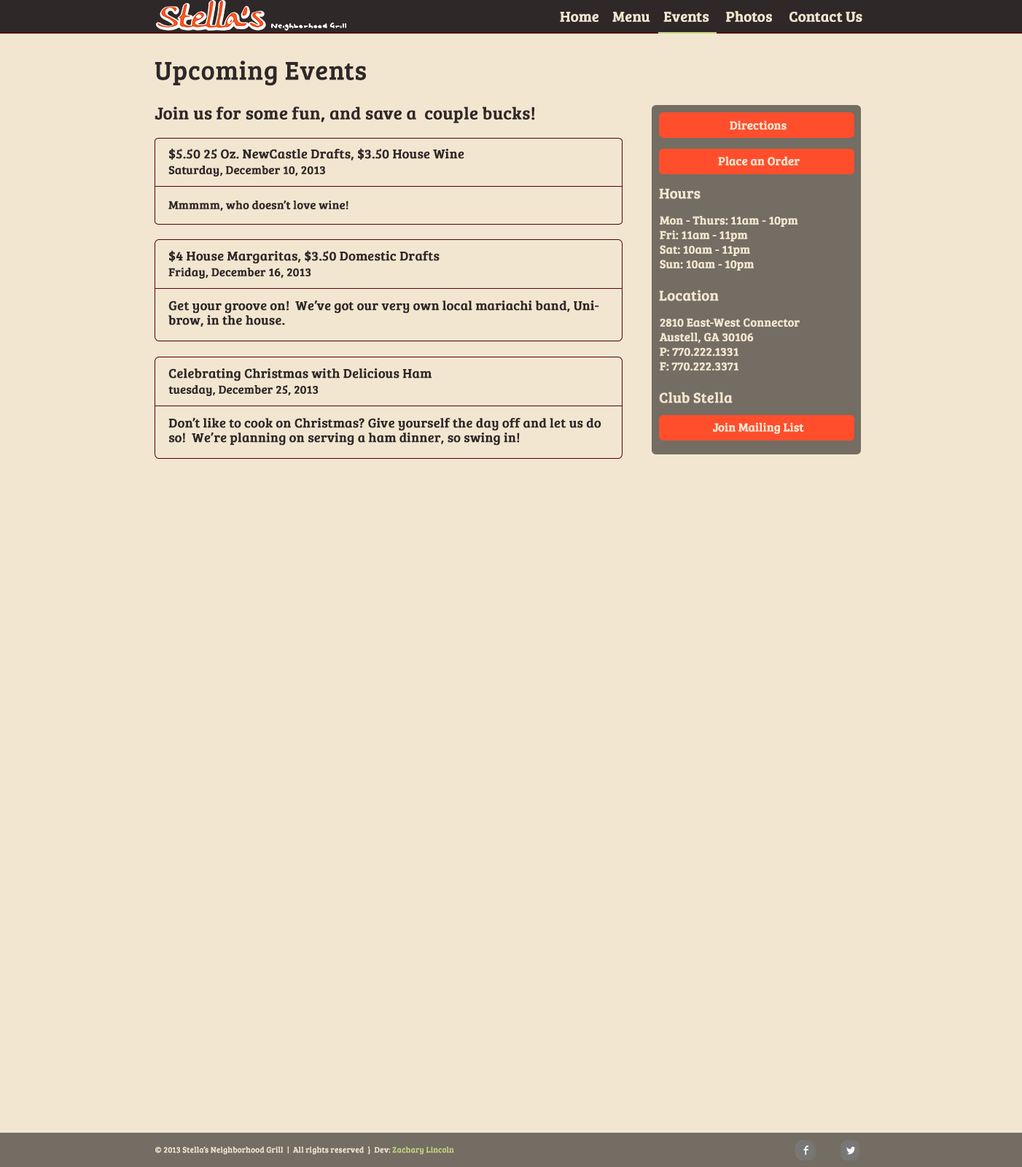
<style>
.page{position:relative;width:1022px;height:1167px;background:#f3e6d0}
.page>*{position:absolute;margin:0}
.t1{font:14.6px "BreeSerif-Regular";color:#f3e6d0;font-weight:bold}
.t2{font:26.2px "BreeSerif-Regular";color:#2e2828;font-weight:bold}
.t3{font:17.5px "BreeSerif-Regular";color:#2e2828;font-weight:bold}
.t4{font:11.7px "BreeSerif-Regular";color:#f3e6d0;font-weight:bold}
.t5{font:13.1px "BreeSerif-Regular";color:#2e2828;font-weight:bold}
.t6{font:11.7px "BreeSerif-Regular";color:#2e2828;font-weight:bold}
.t7{font:11.7px/14.6px "BreeSerif-Regular";color:#f3e6d0;font-weight:bold}
.t8{font:13.1px/14.6px "BreeSerif-Regular";color:#2e2828;font-weight:bold}
.t9{font:8px "BreeSerif-Regular";color:#f3e6d0;font-weight:bold}
.t10{font:8px "BreeSerif-Regular";color:#c5d580;font-weight:bold}
</style>
<div class="page">
<p class="t1" style="left:560px;top:11px;width:303px;height:11px">Home    Menu    Events     Photos     Contact Us</p>
<p class="t2" style="left:155px;top:61px;width:211px;height:25px">Upcoming Events</p>
<p class="t3" style="left:155px;top:106px;width:380px;height:17px">Join us for some fun, and save a  couple bucks!</p>
<p class="t4" style="left:730px;top:120px;width:57px;height:10px">Directions</p>
<p class="t5" style="left:169px;top:148px;width:295px;height:12px">$5.50 25 Oz. NewCastle Drafts, $3.50 House Wine</p>
<p class="t4" style="left:718px;top:156px;width:82px;height:10px">Place an Order</p>
<p class="t6" style="left:168px;top:166px;width:157px;height:10px">Saturday, December 10, 2013</p>
<p class="t1" style="left:659px;top:188px;width:42px;height:11px">Hours</p>
<p class="t6" style="left:168px;top:200px;width:181px;height:11px">Mmmmm, who doesn’t love wine!</p>
<p class="t7" style="left:660px;top:216px;width:138px;height:54px">Mon - Thurs: 11am - 10pm<br>Fri: 11am - 11pm<br>Sat: 10am - 11pm<br>Sun: 10am - 10pm</p>
<p class="t5" style="left:169px;top:250px;width:271px;height:14px">$4 House Margaritas, $3.50 Domestic Drafts</p>
<p class="t6" style="left:168px;top:268px;width:143px;height:11px">Friday, December 16, 2013</p>
<p class="t1" style="left:659px;top:289px;width:60px;height:12px">Location</p>
<p class="t8" style="left:168px;top:300px;width:431px;height:27px">Get your groove on!  We’ve got our very own local mariachi band, Unibrow, in the house.</p>
<p class="t7" style="left:659px;top:318px;width:141px;height:52px">2810 East-West Connector<br>Austell, GA 30106<br>P: 770.222.1331<br>F: 770.222.3371</p>
<p class="t5" style="left:168px;top:368px;width:264px;height:13px">Celebrating Christmas with Delicious Ham</p>
<p class="t6" style="left:168px;top:385px;width:151px;height:11px">tuesday, December 25, 2013</p>
<p class="t1" style="left:659px;top:392px;width:74px;height:11px">Club Stella</p>
<p class="t8" style="left:168px;top:417px;width:434px;height:28px">Don’t like to cook on Christmas? Give yourself the day off and let us do so!  We’re planning on serving a ham dinner, so swing in!</p>
<p class="t4" style="left:713px;top:422px;width:91px;height:12px">Join Mailing List</p>
<p class="t9" style="left:155px;top:1145px;width:299px;height:9px">© 2013 Stella’s Neighborhood Grill  |  All rights reserved  }  Dev: <span class="t10">Zachary Lincoln</span></p>
</div>
